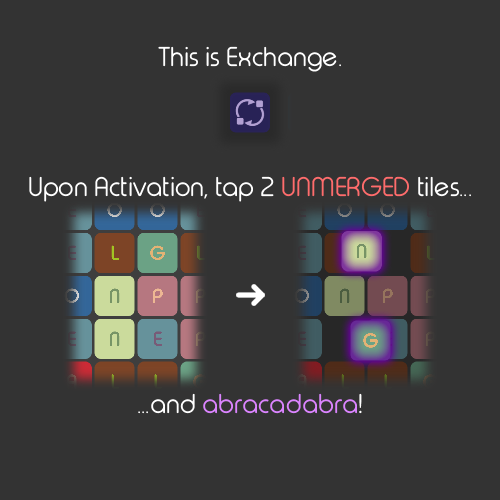
<style>
.page{position:relative;width:500px;height:500px;background:#333333}
.page>*{position:absolute;margin:0}
.t1{font:27px "TypoRoundLightDemo";color:#ffffff}
.t2{font:27px "TypoRoundLightDemo";color:#ff6c6c}
.t3{font:27px "TypoRoundLightDemo";color:#db84ff}
</style>
<div class="page">
<p class="t1" style="left:158px;top:46px;width:183px;height:26px">This is Exchange.</p>
<p class="t1" style="left:29px;top:176px;width:442px;height:26px">Upon Activation, tap 2 <span class="t2">UNMERGED</span> tiles...</p>
<p class="t3" style="left:138px;top:393px;width:224px;height:21px"><span class="t1">...and </span>abracadabra<span class="t1">!</span></p>
</div>
